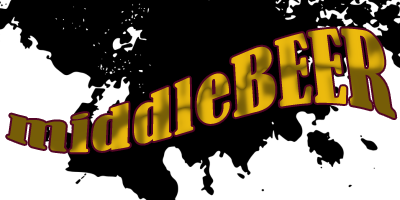
<style>
.page{position:relative;width:400px;height:200px;background:#000000}
.page>*{position:absolute;margin:0}
.t1{font:70px "BernardMT-Condensed";scale:1.23 1}
</style>
<div class="page">
<p class="t1" style="left:7px;top:28px;width:389px;height:125px;text-align:center">middleBEER</p>
</div>
